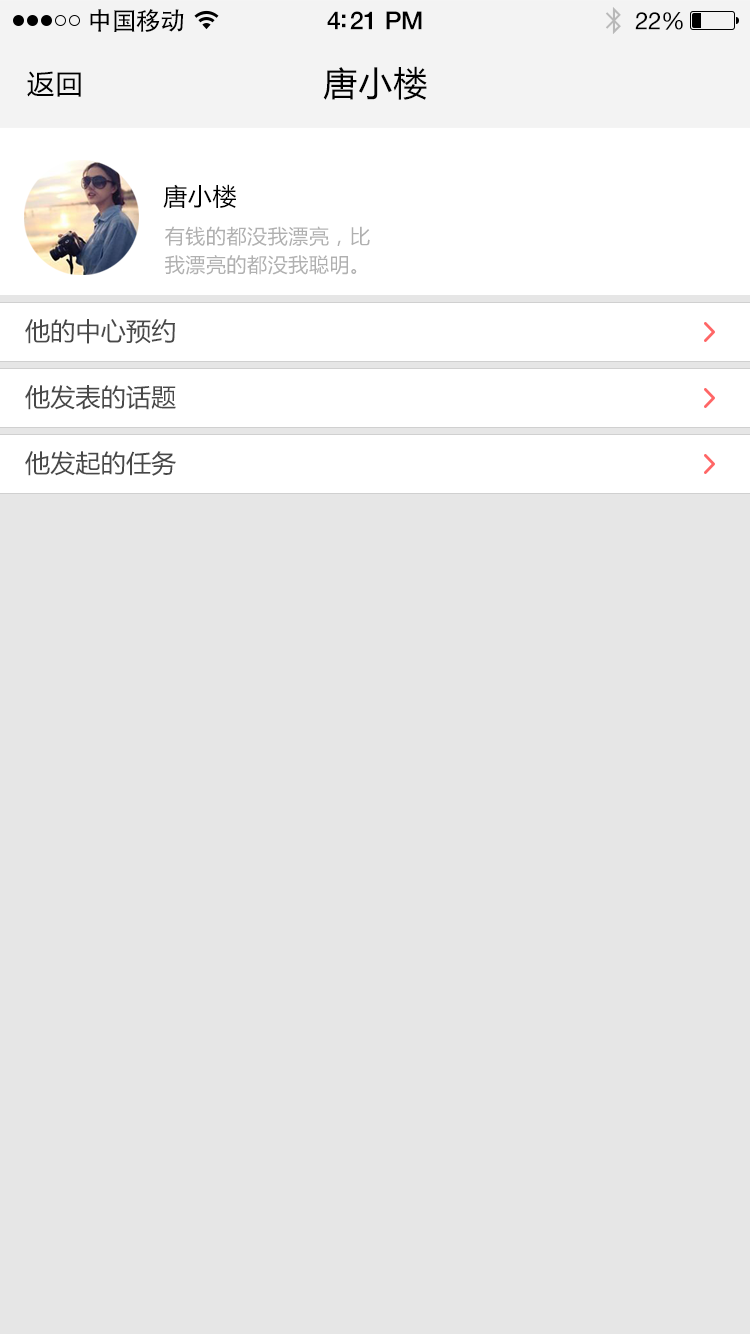
<style>
.page{position:relative;width:750px;height:1334px;background:#e6e6e6}
.page>*{position:absolute;margin:0}
.t1{font:25px "AdobeHeitiStd-Regular";letter-spacing:-0.025em;color:#000000}
.t2{font:25px "HelveticaNeue-Medium";letter-spacing:-0.02em;color:#000000}
.t3{font:24px "HelveticaNeue";letter-spacing:-0.02em;color:#000000}
.t4{font:27px "MicrosoftYaHei";letter-spacing:0.05em;color:#000000}
.t5{font:34px "MicrosoftYaHei";letter-spacing:0.03em;color:#000000}
.t6{font:24px "MicrosoftYaHei";letter-spacing:0.03em;color:#000000}
.t7{font:20px/70px "MicrosoftYaHei";letter-spacing:0.03em;color:#b0b0b0}
.t8{font:25px "MicrosoftYaHei";letter-spacing:0.01em;color:#484848}
</style>
<div class="page">
<p class="t1" style="left:90px;top:9px;width:94px;height:23px">中国移动</p>
<p class="t2" style="left:327px;top:11px;width:95px;height:19px">4:21 PM</p>
<p class="t3" style="left:635px;top:12px;width:48px;height:18px">22%</p>
<p class="t4" style="left:27px;top:71px;width:54px;height:26px">返回</p>
<p class="t5" style="left:323px;top:66px;width:104px;height:34px">唐小楼</p>
<p class="t6" style="left:163px;top:184px;width:73px;height:24px">唐小楼</p>
<p class="t7" style="left:165px;top:226px;width:205px;height:49px">有钱的都没我漂亮，比<br>我漂亮的都没我聪明。</p>
<p class="t8" style="left:25px;top:319px;width:150px;height:25px">他的中心预约</p>
<p class="t8" style="left:25px;top:385px;width:151px;height:25px">他发表的话题</p>
<p class="t8" style="left:25px;top:451px;width:151px;height:25px">他发起的任务</p>
</div>
